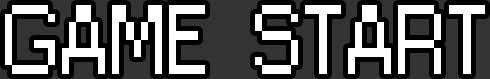
<style>
.page{position:relative;width:490px;height:79px;background:#333333}
.page>*{position:absolute;margin:0}
.t1{font:91.7px "Small Fonts";color:#ffffff}
</style>
<div class="page">
<p class="t1" style="left:5px;top:5px;width:480px;height:69px">GAME   START</p>
</div>
